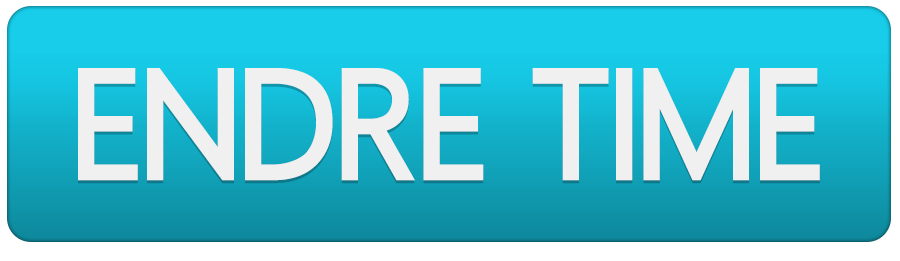
<style>
.page{position:relative;width:900px;height:261px}
.page>*{position:absolute;margin:0}
.t1{font:160px "Homizio-Black";color:#f0f0f0}
</style>
<div class="page">
<p class="t1" style="left:78px;top:68px;width:742px;height:113px">ENDRE TIME</p>
</div>
